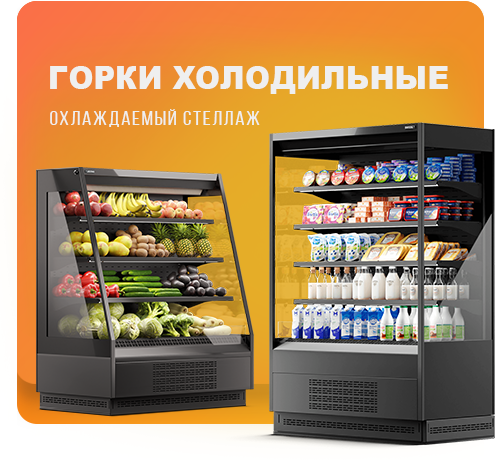
<style>
.page{position:relative;width:500px;height:460px}
.page>*{position:absolute;margin:0}
.t1{font:31.9px "Arial-Black";letter-spacing:-0.02em;color:#efefef;text-transform:uppercase;scale:0.94 1}
.t2{font:18.7px "BebasNeueRegular";letter-spacing:0.06em;color:#efefef;scale:1.2 1}
</style>
<div class="page">
<p class="t1" style="left:50px;top:66px;width:398px;height:28px">Горки холодильные</p>
<p class="t2" style="left:50px;top:109px;width:210px;height:18px">Охлаждаемый стеллаж</p>
</div>
